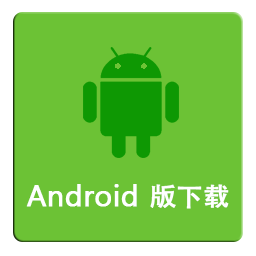
<style>
.page{position:relative;width:256px;height:256px;background:#6cc235}
.page>*{position:absolute;margin:0}
.t1{font:30px "Ebrima";color:#ffffff;font-weight:bold}
.t2{font:26px "AdobeHeitiStd-Regular";color:#ffffff;font-weight:bold}
</style>
<div class="page">
<p class="t1" style="left:26px;top:184px;width:203px;height:25px">Android <span class="t2">版下载</span></p>
</div>
